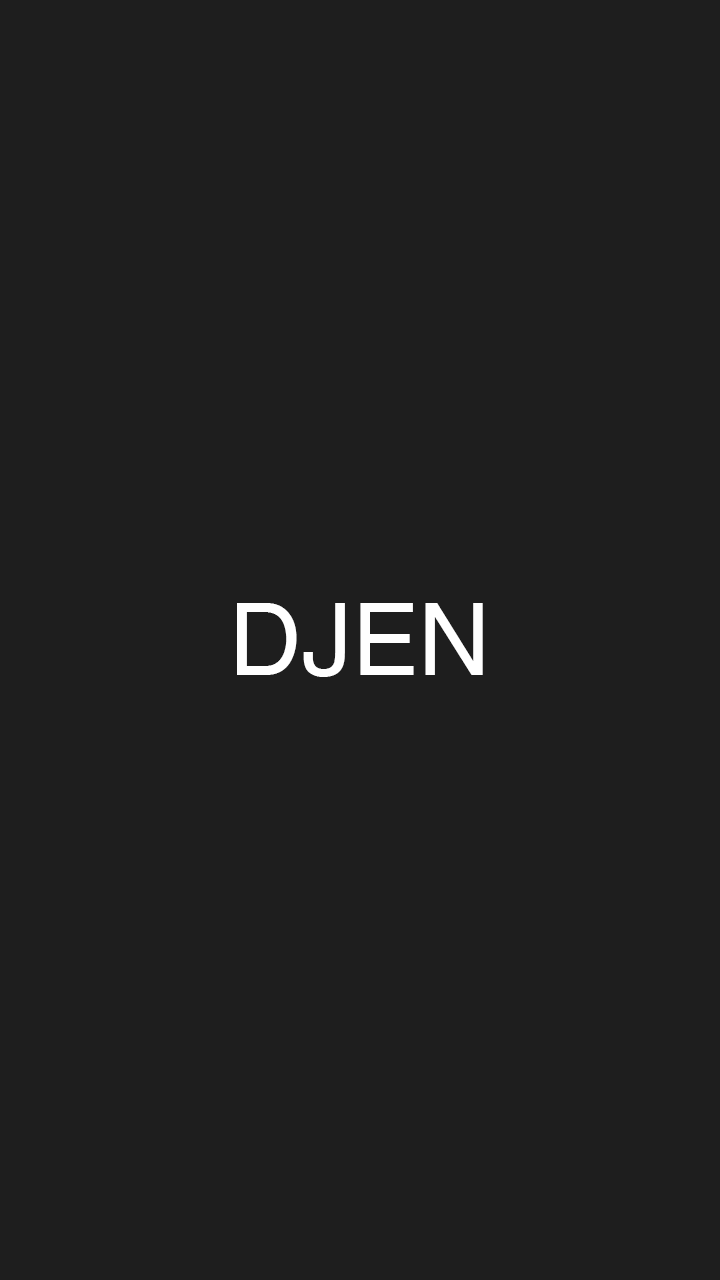
<style>
.page{position:relative;width:720px;height:1280px;background:#1e1e1e}
.page>*{position:absolute;margin:0}
.t1{font:100px "Helvetica";color:#ffffff}
</style>
<div class="page">
<p class="t1" style="left:237px;top:603px;width:246px;height:74px">DJEN</p>
</div>
